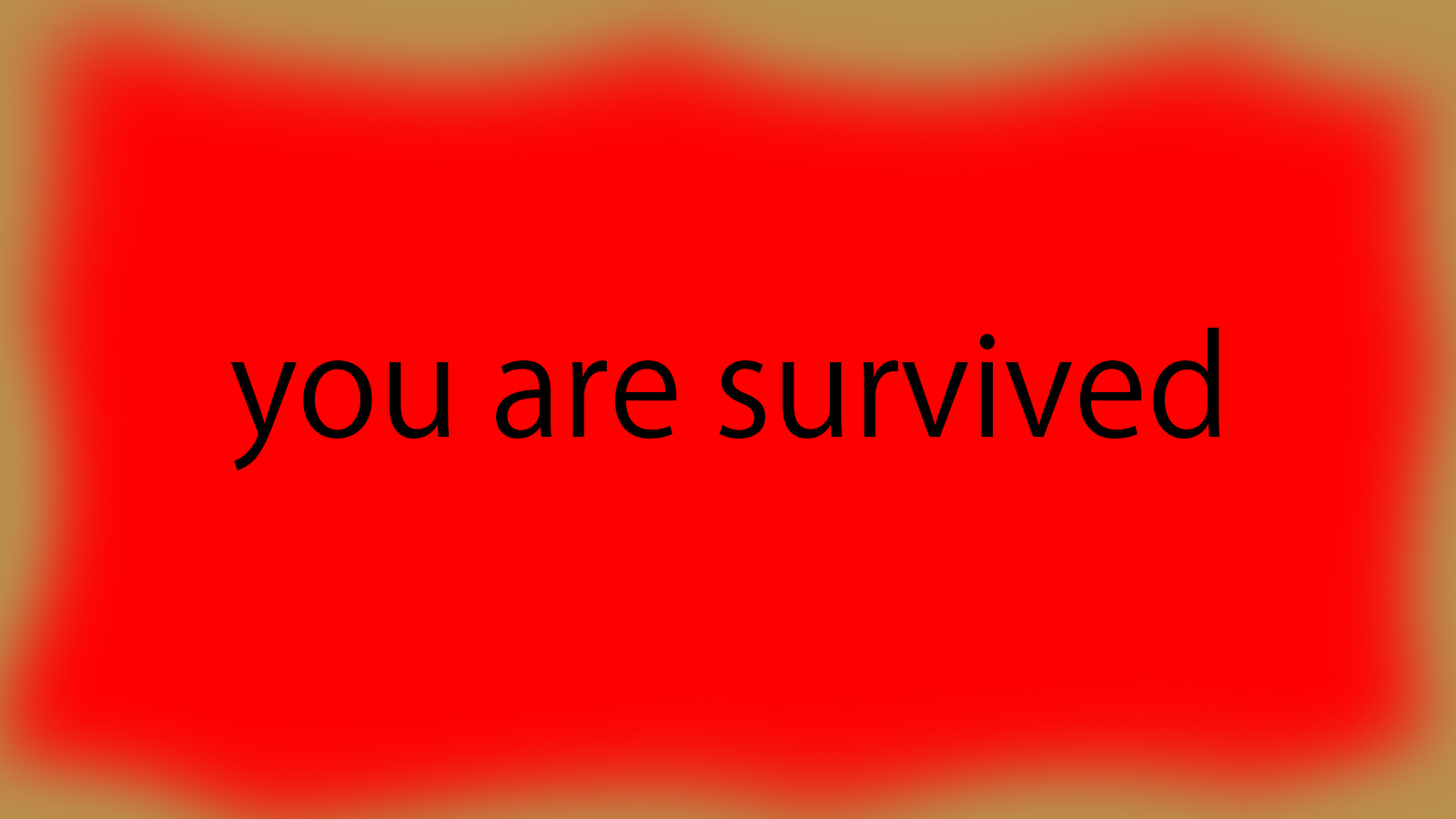
<style>
.page{position:relative;width:1456px;height:819px;background:#ff0000}
.page>*{position:absolute;margin:0}
.t1{font:136.5px "KozGoPr6N-Regular";color:#000000}
</style>
<div class="page">
<p class="t1" style="left:230px;top:328px;width:990px;height:142px">you are survived</p>
</div>
